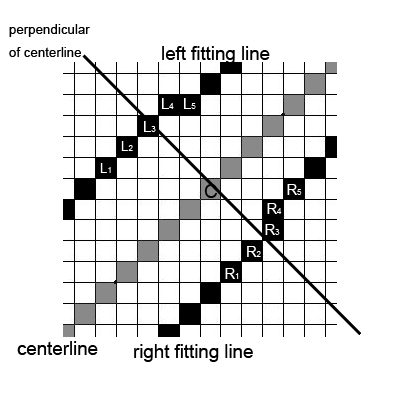
<style>
.page{position:relative;width:400px;height:400px;background:#ffffff}
.page>*{position:absolute;margin:0}
.t1{font:13.3px "ArialMT";color:#000000}
.t2{font:18.7px "ArialMT";color:#000000}
.t3{font:14.7px "ArialMT";color:#ffffff}
.t4{font:8px "ArialMT";color:#ffffff}
.t5{font:13.3px "ArialMT";color:#ffffff}
</style>
<div class="page">
<p class="t1" style="left:9px;top:24px;width:81px;height:33px">perpendicular <br>of centerline</p>
<p class="t2" style="left:162px;top:46px;width:108px;height:18px">left fitting line</p>
<p class="t3" style="left:162px;top:98px;width:12px;height:11px">L<span class="t4">4</span></p>
<p class="t3" style="left:184px;top:98px;width:12px;height:11px">L<span class="t4">5</span></p>
<p class="t3" style="left:144px;top:121px;width:12px;height:11px">L<span class="t4">3</span></p>
<p class="t5" style="left:121px;top:141px;width:12px;height:10px">L<span class="t4">2</span></p>
<p class="t5" style="left:100px;top:163px;width:11px;height:10px">L<span class="t4">1</span></p>
<p class="t2" style="left:204px;top:184px;width:13px;height:14px">C</p>
<p class="t3" style="left:287px;top:184px;width:15px;height:11px">R<span class="t4">5</span></p>
<p class="t3" style="left:267px;top:203px;width:15px;height:11px">R<span class="t4">4</span></p>
<p class="t3" style="left:265px;top:224px;width:15px;height:11px">R<span class="t4">3</span></p>
<p class="t3" style="left:247px;top:246px;width:14px;height:11px">R<span class="t4">2</span></p>
<p class="t3" style="left:225px;top:268px;width:14px;height:11px">R<span class="t4">1</span></p>
<p class="t2" style="left:17px;top:341px;width:81px;height:14px">centerline</p>
<p class="t2" style="left:134px;top:344px;width:119px;height:18px">right fitting line</p>
</div>
